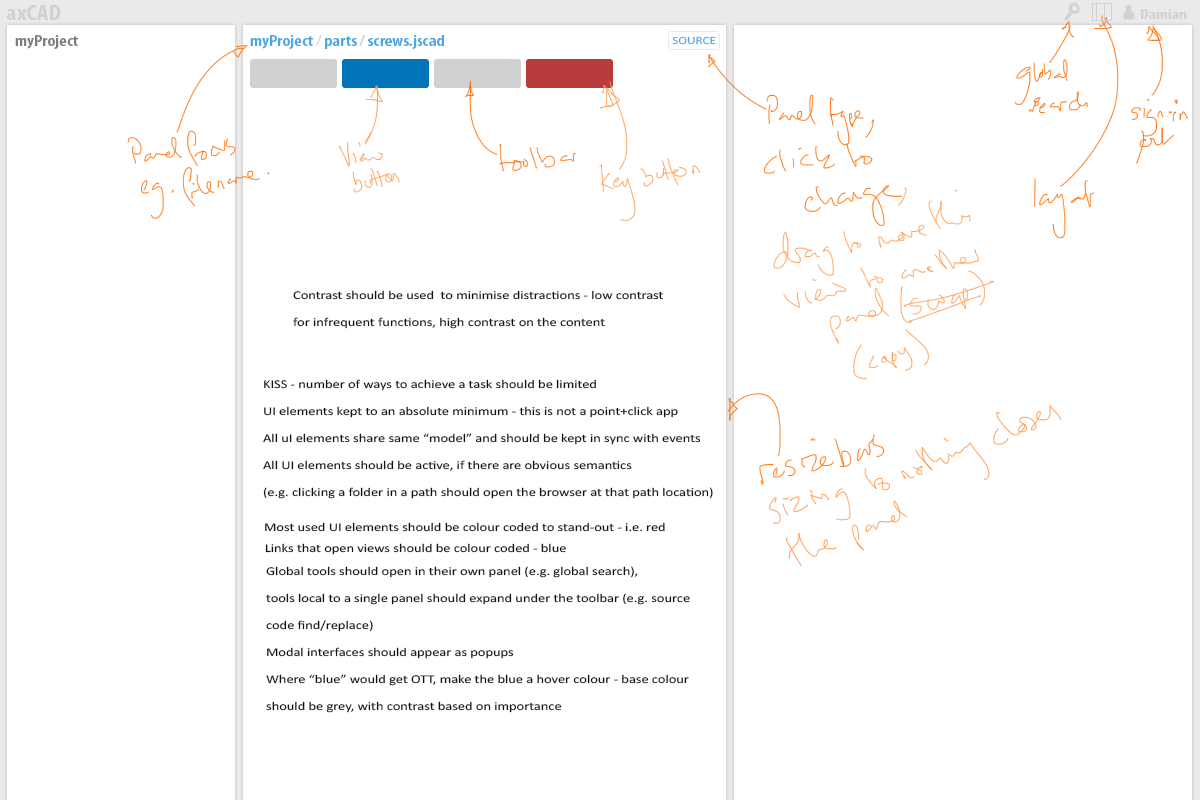
<style>
.page{position:relative;width:1200px;height:800px;background:#ffffff}
.page>*{position:absolute;margin:0}
.t1{font:21.2px "MyriadPro-BoldCond";color:#d1d1d1;scale:1.19 1}
.t2{font:13.8px "MyriadPro-BoldCond";color:#d1d1d1;scale:1.26 1}
.t3{font:15px "MyriadPro-BoldCond";color:#7d7d7d;scale:1.2 1}
.t4{font:15px "MyriadPro-BoldCond";color:#4aa9e2;scale:1.2 1}
.t5{font:15px "MyriadPro-BoldCond";color:#d8d8d8;scale:1.2 1}
.t6{font:15px "MyriadPro-BoldCond";color:#cbcbcb;scale:1.2 1}
.t7{font:11px "Calibri";color:#4aa9e2;scale:1.2 1}
.t8{font:12px/27px "Calibri";color:#121212;scale:1.2 1}
.t9{font:12px "Calibri";color:#121212;scale:1.2 1}
</style>
<div class="page">
<p class="t1" style="left:6px;top:5px;width:55px;height:15px">axCAD</p>
<p class="t2" style="left:1141px;top:9px;width:46px;height:10px">Damian</p>
<p class="t3" style="left:15px;top:35px;width:63px;height:14px">myProject</p>
<p class="t4" style="left:250px;top:35px;width:194px;height:14px">myProject<span class="t5"> /</span> parts <span class="t6">/ </span>screws.jscad</p>
<p class="t7" style="left:672px;top:36px;width:44px;height:9px">SOURCE</p>
<p class="t8" style="left:293px;top:290px;width:371px;height:39px">Contrast should be used  to minimise distractions - low contrast<br>for infrequent functions, high contrast on the content</p>
<p class="t8" style="left:263px;top:379px;width:450px;height:120px">KISS - number of ways to achieve a task should be limited<br>UI elements kept to an absolute minimum - this is not a point+click app<br>All uI elements share same “model” and should be kept in sync with events<br>All UI elements should be active, if there are obvious semantics <br>(e.g. clicking a folder in a path should open the browser at that path location)</p>
<p class="t9" style="left:265px;top:522px;width:400px;height:10px">Most used UI elements should be colour coded to stand-out - i.e. red</p>
<p class="t9" style="left:265px;top:543px;width:301px;height:12px">Links that open views should be colour coded - blue</p>
<p class="t8" style="left:266px;top:566px;width:424px;height:147px">Global tools should open in their own panel (e.g. global search),<br>tools local to a single panel should expand under the toolbar (e.g. source<br>code find/replace)<br>Modal interfaces should appear as popups<br>Where “blue” would get OTT, make the blue a hover colour - base colour<br>should be grey, with contrast based on importance</p>
</div>
